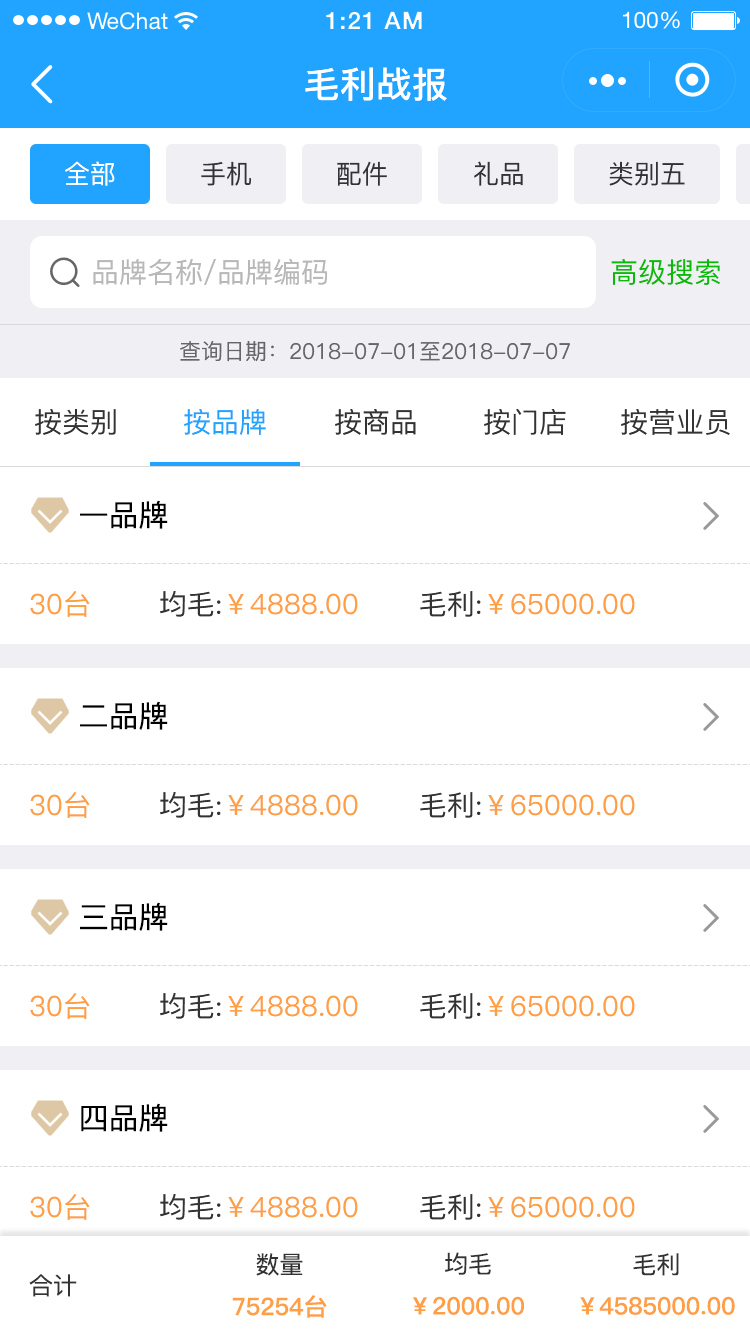
<style>
.page{position:relative;width:750px;height:1334px;background:#ffffff}
.page>*{position:absolute;margin:0}
.t1{font:36px "PingFang-SC-Bold";color:#ffffff}
.t2{font:26px "PingFang-SC-Medium";color:#ffffff}
.t3{font:26px "PingFang-SC-Medium";color:#333333}
.t4{font:28px "PingFang-SC-Medium";color:#b8b8b8}
.t5{font:28px "PingFang-SC-Medium";color:#09bb07}
.t6{font:22px "PingFang-SC-Medium";color:#666666}
.t7{font:28px "PingFang-SC-Medium";color:#333333}
.t8{font:28px "PingFang-SC-Medium";color:#21a4ff}
.t9{font:30px "PingFang-SC-Medium";color:#000000}
.t10{font:28px "PingFang-SC-Medium";color:#fe9f45}
.t11{font:24px "PingFang-SC-Medium";color:#333333}
.t12{font:24px "PingFang-SC-Bold";color:#fe9f45}
</style>
<div class="page">
<p class="t1" style="left:305px;top:67px;width:142px;height:34px">毛利战报</p>
<p class="t2" style="left:65px;top:161px;width:50px;height:25px">全部</p>
<p class="t3" style="left:201px;top:161px;width:50px;height:25px">手机</p>
<p class="t3" style="left:337px;top:161px;width:50px;height:25px">配件</p>
<p class="t3" style="left:474px;top:161px;width:49px;height:25px">礼品</p>
<p class="t3" style="left:609px;top:161px;width:76px;height:25px">类别五</p>
<p class="t4" style="left:93px;top:259px;width:234px;height:26px">品牌名称/品牌编码</p>
<p class="t5" style="left:611px;top:259px;width:109px;height:26px">高级搜索</p>
<p class="t6" style="left:180px;top:341px;width:390px;height:21px">查询日期：2018-07-01至2018-07-07</p>
<p class="t7" style="left:35px;top:409px;width:81px;height:26px">按类别</p>
<p class="t8" style="left:184px;top:409px;width:82px;height:26px">按品牌</p>
<p class="t7" style="left:335px;top:409px;width:81px;height:26px">按商品</p>
<p class="t7" style="left:484px;top:409px;width:82px;height:26px">按门店</p>
<p class="t7" style="left:621px;top:409px;width:109px;height:26px">按营业员</p>
<p class="t9" style="left:80px;top:500px;width:88px;height:29px">一品牌</p>
<p class="t10" style="left:30px;top:591px;width:60px;height:26px">30台</p>
<p class="t10" style="left:160px;top:591px;width:198px;height:26px"><span class="t7">均毛:</span>￥4888.00</p>
<p class="t10" style="left:420px;top:591px;width:215px;height:26px"><span class="t7">毛利:</span>￥65000.00</p>
<p class="t9" style="left:80px;top:701px;width:88px;height:29px">二品牌</p>
<p class="t10" style="left:30px;top:792px;width:60px;height:26px">30台</p>
<p class="t10" style="left:160px;top:792px;width:198px;height:26px"><span class="t7">均毛:</span>￥4888.00</p>
<p class="t10" style="left:420px;top:792px;width:215px;height:26px"><span class="t7">毛利:</span>￥65000.00</p>
<p class="t9" style="left:80px;top:902px;width:88px;height:29px">三品牌</p>
<p class="t10" style="left:30px;top:993px;width:60px;height:26px">30台</p>
<p class="t10" style="left:160px;top:993px;width:198px;height:26px"><span class="t7">均毛:</span>￥4888.00</p>
<p class="t10" style="left:420px;top:993px;width:215px;height:26px"><span class="t7">毛利:</span>￥65000.00</p>
<p class="t9" style="left:81px;top:1103px;width:87px;height:29px">四品牌</p>
<p class="t10" style="left:30px;top:1194px;width:60px;height:26px">30台</p>
<p class="t10" style="left:160px;top:1194px;width:198px;height:26px"><span class="t7">均毛:</span>￥4888.00</p>
<p class="t10" style="left:420px;top:1194px;width:215px;height:26px"><span class="t7">毛利:</span>￥65000.00</p>
<p class="t11" style="left:256px;top:1253px;width:47px;height:23px">数量</p>
<p class="t11" style="left:445px;top:1252px;width:46px;height:23px">均毛</p>
<p class="t11" style="left:633px;top:1253px;width:46px;height:23px">毛利</p>
<p class="t11" style="left:29px;top:1274px;width:48px;height:23px">合计</p>
<p class="t12" style="left:232px;top:1295px;width:95px;height:23px">75254台</p>
<p class="t12" style="left:413px;top:1296px;width:111px;height:19px">￥2000.00</p>
<p class="t12" style="left:580px;top:1296px;width:155px;height:19px">￥4585000.00</p>
</div>
